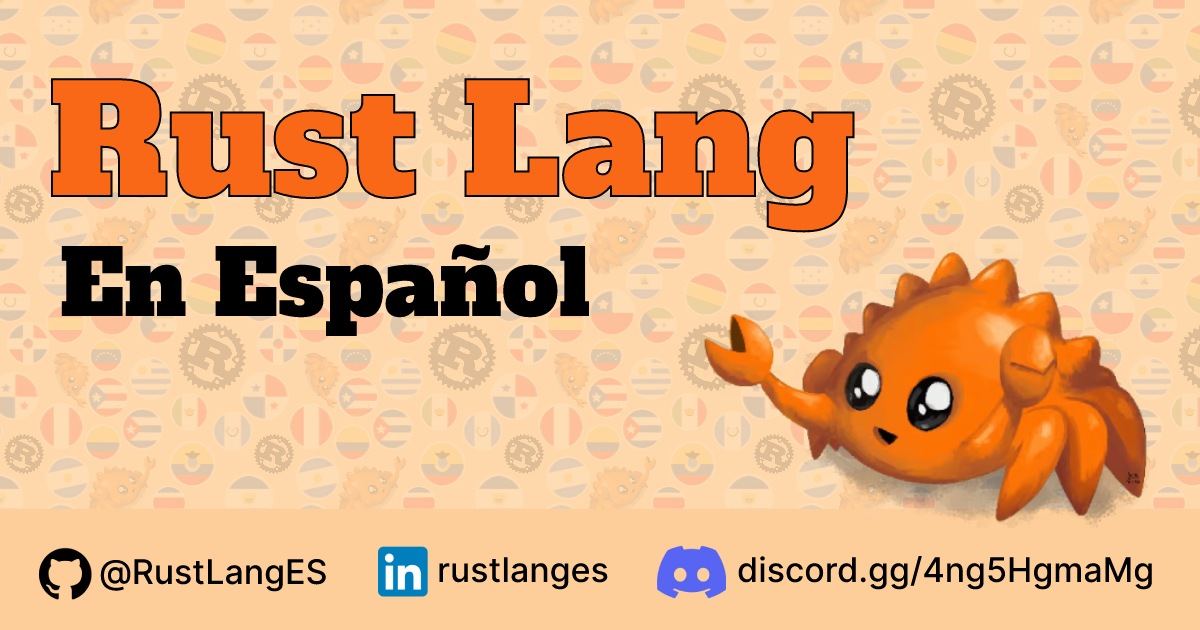
<style>
.page{position:relative;width:1200px;height:630px;background:#fed7aa}
.page>*{position:absolute;margin:0}
.t1{font:150px "AlfaSlabOne-Regular";color:#f96817}
.t2{font:90px "AlfaSlabOne-Regular";color:#000000}
.t3{font:34px "Inter-Medium";color:#000000}
</style>
<div class="page">
<p class="t1" style="left:51px;top:78px;width:804px;height:155px">Rust Lang</p>
<p class="t2" style="left:61px;top:244px;width:529px;height:92px">En Español</p>
<p class="t3" style="left:100px;top:558px;width:226px;height:34px">@RustLangES</p>
<p class="t3" style="left:439px;top:557px;width:169px;height:33px">rustlanges</p>
<p class="t3" style="left:738px;top:556px;width:414px;height:34px">discord.gg/4ng5HgmaMg</p>
</div>
